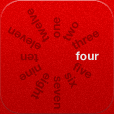
<style>
.page{position:relative;width:114px;height:114px}
.page>*{position:absolute;margin:0}
.t1{font:12px "HelveticaNeue-Bold";color:#950000}
.t2{font:12px "HelveticaNeue-Bold";color:#7d0000}
.t3{font:12px "HelveticaNeue-Bold";color:#e6e6e6}
</style>
<div class="page">
<p class="t1" style="left:27px;top:8px;width:23px;height:35px;rotate:-120deg">twelve</p>
<p class="t2" style="left:53px;top:17px;width:8px;height:21px;rotate:-90deg;opacity:0.7">one</p>
<p class="t2" style="left:8px;top:26px;width:33px;height:24px;rotate:-150deg;opacity:0.7">eleven</p>
<p class="t2" style="left:62px;top:22px;width:17px;height:19px;rotate:-60deg;opacity:0.7">two</p>
<p class="t2" style="left:71px;top:31px;width:29px;height:19px;rotate:-30deg;opacity:0.7">three</p>
<p class="t2" style="left:20px;top:53px;width:19px;height:9px;rotate:180deg;opacity:0.7">ten</p>
<p class="t3" style="left:75px;top:51px;width:24px;height:10px">four</p>
<p class="t2" style="left:19px;top:64px;width:23px;height:17px;rotate:150deg;opacity:0.7">nine</p>
<p class="t2" style="left:72px;top:62px;width:20px;height:16px;rotate:30deg;opacity:0.7">five</p>
<p class="t2" style="left:30px;top:73px;width:20px;height:27px;rotate:120deg;opacity:0.7">eight</p>
<p class="t2" style="left:53px;top:76px;width:8px;height:33px;rotate:90deg;opacity:0.7">seven</p>
<p class="t2" style="left:64px;top:72px;width:14px;height:17px;rotate:60deg;opacity:0.7">six</p>
</div>
